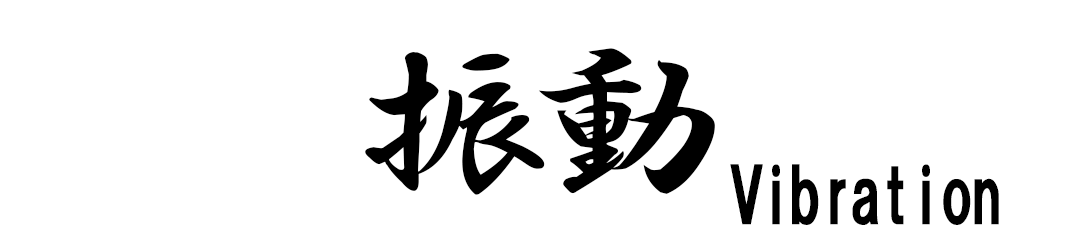
<style>
.page{position:relative;width:1080px;height:240px;background:#ffffff}
.page>*{position:absolute;margin:0}
.t1{font:195.8px "HGSGyoshotai";letter-spacing:-0.1em;color:#000000}
.t2{font:75px "HGSoeiKakugothicUB";letter-spacing:-0.1em;color:#000000}
</style>
<div class="page">
<p class="t1" style="left:365px;top:48px;width:350px;height:147px">振動</p>
<p class="t2" style="left:730px;top:164px;width:269px;height:61px">Vibration</p>
</div>
